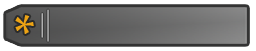
<style>
.page{position:relative;width:256px;height:51px;background:#ffffff}
.page>*{position:absolute;margin:0}
.t1{font:54.8px "PalatinoLinotype-Roman";color:#eda314}
</style>
<div class="page">
<p class="t1" style="left:15px;top:15px;width:19px;height:19px">*</p>
</div>
